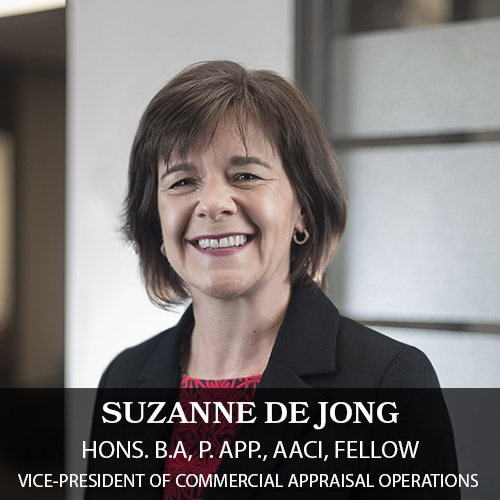
<style>
.page{position:relative;width:500px;height:500px}
.page>*{position:absolute;margin:0}
.t1{font:30px "Bookmania-Semibold";color:#ffffff;scale:1.04 1}
.t2{font:24px "MyriadPro-Regular";color:#ffffff;scale:1.04 1}
.t3{font:18px "MyriadPro-Regular";color:#ffffff;scale:1.04 1}
</style>
<div class="page">
<p class="t1" style="left:102px;top:402px;width:297px;height:28px">SUZANNE DE JONG</p>
<p class="t2" style="left:83px;top:441px;width:336px;height:20px">HONS. B.A, P. APP., AACI, FELLOW</p>
<p class="t3" style="left:18px;top:474px;width:460px;height:13px">VICE-PRESIDENT OF COMMERCIAL APPRAISAL OPERATIONS</p>
</div>
